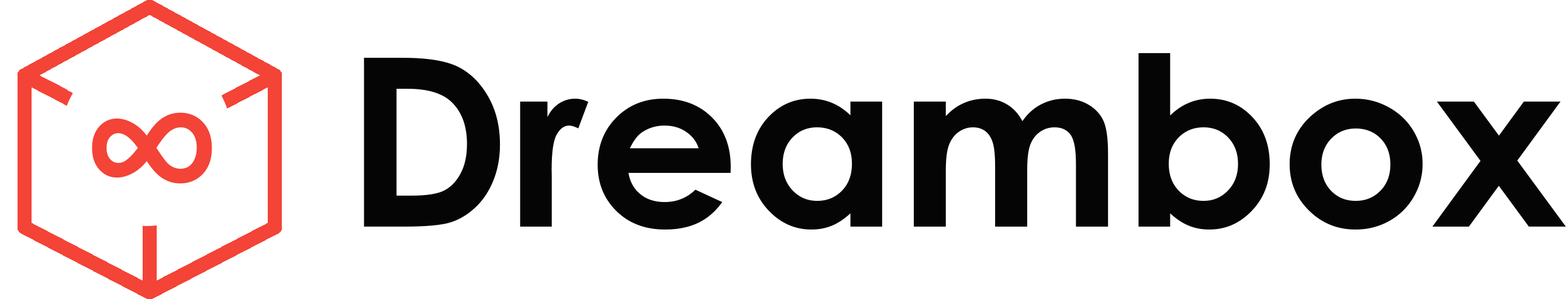
<style>
.page{position:relative;width:1568px;height:299px;background:#ffffff}
.page>*{position:absolute;margin:0}
.t1{font:235.7px "CenturyGothic-Bold";color:#050505}
.t2{font:207.8px "CenturyGothic-Bold";color:#f44337}
</style>
<div class="page">
<p class="t1" style="left:364px;top:53px;width:1202px;height:177px">Dreambox</p>
<p class="t2" style="left:92px;top:112px;width:120px;height:72px">∞</p>
</div>
